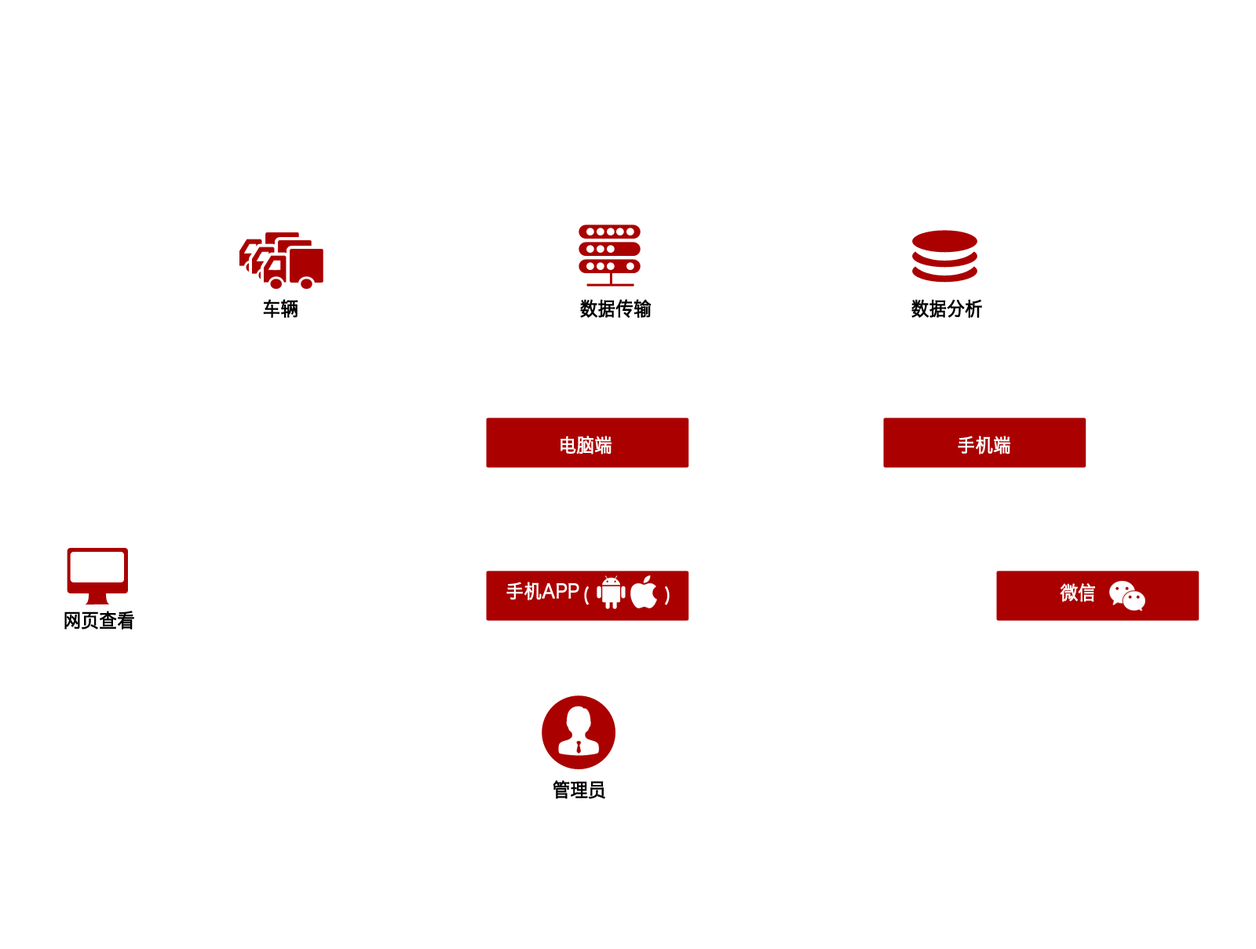
<style>
.page{position:relative;width:1256px;height:949px;background:#ffffff}
.page>*{position:absolute;margin:0}
.t1{font:19.2px "HiraginoSansGB-W3";color:#000000;font-weight:bold;scale:0.91 1}
.t2{font:19.2px "HiraginoSansGB-W3";color:#ffffff;font-weight:bold;scale:0.91 1}
</style>
<div class="page">
<p class="t1" style="left:263px;top:299px;width:35px;height:19px">车辆</p>
<p class="t1" style="left:580px;top:299px;width:72px;height:19px">数据传输</p>
<p class="t1" style="left:912px;top:299px;width:70px;height:19px">数据分析</p>
<p class="t2" style="left:561px;top:436px;width:51px;height:19px">电脑端</p>
<p class="t2" style="left:958px;top:436px;width:52px;height:19px">手机端</p>
<p class="t2" style="left:506px;top:582px;width:73px;height:19px">手机APP</p>
<p class="t2" style="left:1060px;top:583px;width:35px;height:19px">微信</p>
<p class="t1" style="left:64px;top:611px;width:70px;height:19px">网页查看</p>
<p class="t1" style="left:553px;top:780px;width:52px;height:19px">管理员</p>
</div>
